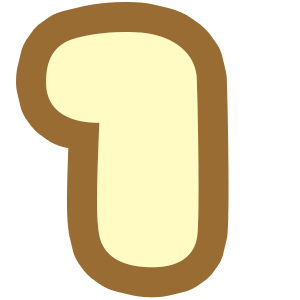
<style>
.page{position:relative;width:300px;height:300px;background:#ffffff}
.page>*{position:absolute;margin:0}
.t1{font:310.1px "AmeChanPopMaruLight-Regular";letter-spacing:0.08em;color:#fffbc2;scale:1.09 1}
</style>
<div class="page">
<p class="t1" style="left:46px;top:32px;width:153px;height:236px">1</p>
</div>
